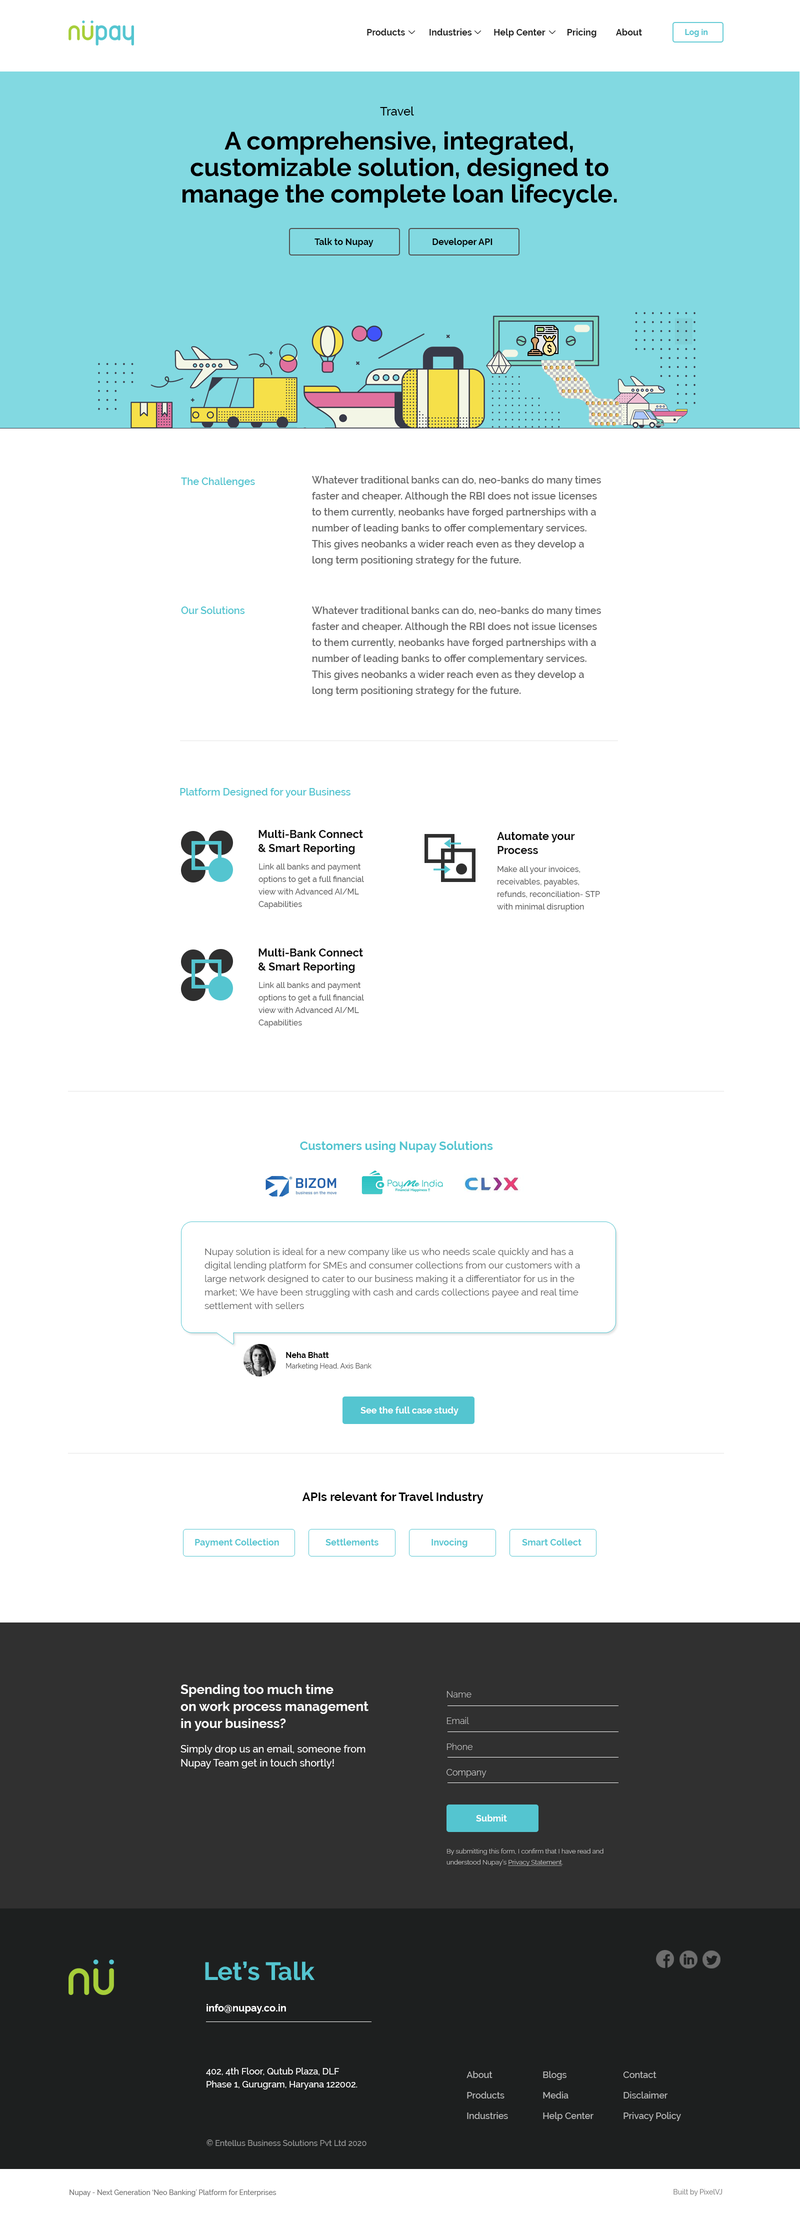
<style>
.page{position:relative;width:800px;height:2224px;background:#ffffff}
.page>*{position:absolute;margin:0}
.t1{font:9px "Raleway-Bold";color:#222222}
.t2{font:8px "Raleway-Bold";color:#54c5d0}
.t3{font:12px "Raleway-Medium";color:#000000}
.t4{font:25px/26.5px "Raleway-Bold";color:#000000}
.t5{font:9px "Raleway-Bold";color:#000000}
.t6{font:10px "Raleway-SemiBold";color:#54c5d0}
.t7{font:10px/16px "Raleway-SemiBold";color:#6b6b6b}
.t8{font:12px "Raleway-Bold";color:#54c5d0}
.t9{font:9.5px/13.5px "Raleway-Regular";color:#585858}
.t10{font:8px "Raleway-Bold";color:#000000}
.t11{font:7px "Raleway-Regular";color:#565656}
.t12{font:9px "Raleway-Bold";color:#ffffff}
.t13{font:12px "Raleway-Bold";color:#000000}
.t14{font:9px "Raleway-Bold";color:#54c5d0}
.t15{font:13px/17px "Raleway-Bold";color:#ffffff}
.t16{font:9px "Raleway-Light";color:#bebebe}
.t17{font:10px/14px "Raleway-Medium";color:#ffffff}
.t18{font:9px "Raleway-Light";color:#cbcbcb}
.t19{font:6.5px/11px "Raleway-Light";color:#cbcbcb}
.t20{font:6.5px/11px "Raleway-Light";color:#cbcbcb;text-decoration:underline}
</style>
<div class="page">
<p class="t1" style="left:367px;top:28px;width:275px;height:10px">Products           Industries          Help Center          Pricing         About</p>
<p class="t2" style="left:685px;top:29px;width:23px;height:8px">Log in</p>
<p class="t3" style="left:380px;top:106px;width:34px;height:10px">Travel</p>
<p class="t4" style="left:182px;top:131px;width:435px;height:77px;text-align:center">A comprehensive, integrated, <br>customizable solution, designed to manage the complete loan lifecycle.</p>
<p class="t5" style="left:314px;top:238px;width:60px;height:9px">Talk to Nupay</p>
<p class="t5" style="left:432px;top:238px;width:60px;height:9px">Developer API</p>
<p class="t6" style="left:181px;top:478px;width:74px;height:9px">The Challenges</p>
<p class="t7" style="left:312px;top:476px;width:289px;height:90px">Whatever traditional banks can do, neo-banks do many times faster and cheaper. Although the RBI does not issue licenses to them currently, neobanks have forged partnerships with a number of leading banks to offer complementary services. This gives neobanks a wider reach even as they develop a long term positioning strategy for the future.</p>
<p class="t6" style="left:181px;top:606px;width:64px;height:8px">Our Solutions</p>
<p class="t7" style="left:312px;top:606px;width:289px;height:90px">Whatever traditional banks can do, neo-banks do many times faster and cheaper. Although the RBI does not issue licenses to them currently, neobanks have forged partnerships with a number of leading banks to offer complementary services. This gives neobanks a wider reach even as they develop a long term positioning strategy for the future.</p>
<p class="t6" style="left:180px;top:788px;width:170px;height:10px">Platform Designed for your Business</p>
<p class="t8" style="left:300px;top:1141px;width:193px;height:11px">Customers using Nupay Solutions</p>
<p class="t9" style="left:204px;top:1248px;width:376px;height:61px">Nupay solution is ideal for a new company like us who needs scale quickly and has a <br>digital lending platform for SMEs and consumer collections from our customers with a large network designed to cater to our business making it a differentiator for us in the market; We have been struggling with cash and cards collections payee and real time settlement with sellers</p>
<p class="t10" style="left:286px;top:1352px;width:43px;height:6px">Neha Bhatt</p>
<p class="t11" style="left:286px;top:1363px;width:86px;height:7px">Marketing Head, Axis Bank</p>
<p class="t12" style="left:360px;top:1406px;width:98px;height:10px">See the full case study</p>
<p class="t13" style="left:302px;top:1492px;width:182px;height:12px">APIs relevant for Travel Industry</p>
<p class="t14" style="left:195px;top:1538px;width:84px;height:10px">Payment Collection</p>
<p class="t14" style="left:326px;top:1538px;width:52px;height:8px">Settlements</p>
<p class="t14" style="left:432px;top:1538px;width:36px;height:10px">Invocing</p>
<p class="t14" style="left:522px;top:1538px;width:60px;height:8px">Smart Collect</p>
<p class="t15" style="left:180px;top:1684px;width:188px;height:47px">Spending too much time <br>on work process management<br>in your business?</p>
<p class="t16" style="left:447px;top:1691px;width:25px;height:7px">Name</p>
<p class="t16" style="left:447px;top:1717px;width:23px;height:7px">Email</p>
<p class="t17" style="left:180px;top:1745px;width:186px;height:23px">Simply drop us an email, someone from Nupay Team get in touch shortly!</p>
<p class="t16" style="left:447px;top:1743px;width:25px;height:7px">Phone</p>
<p class="t18" style="left:446px;top:1769px;width:40px;height:9px">Company</p>
<p class="t12" style="left:476px;top:1814px;width:31px;height:8px">Submit</p>
<p class="t19" style="left:446px;top:1848px;width:158px;height:18px">By submitting this form, I confirm that I have read and understood Nupay’s <span class="t20">Privacy Statement</span>.</p>
</div>
